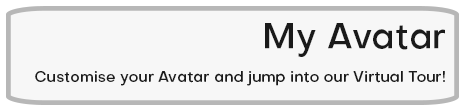
<style>
.page{position:relative;width:465px;height:111px;background:#f7f7f7}
.page>*{position:absolute;margin:0}
.t1{font:15px "Objectivity-Medium";color:#1a1a1a}
</style>
<div class="page">
<p class="t1" style="left:35px;top:71px;width:410px;height:15px">Customise your Avatar and jump into our Virtual Tour!</p>
</div>
